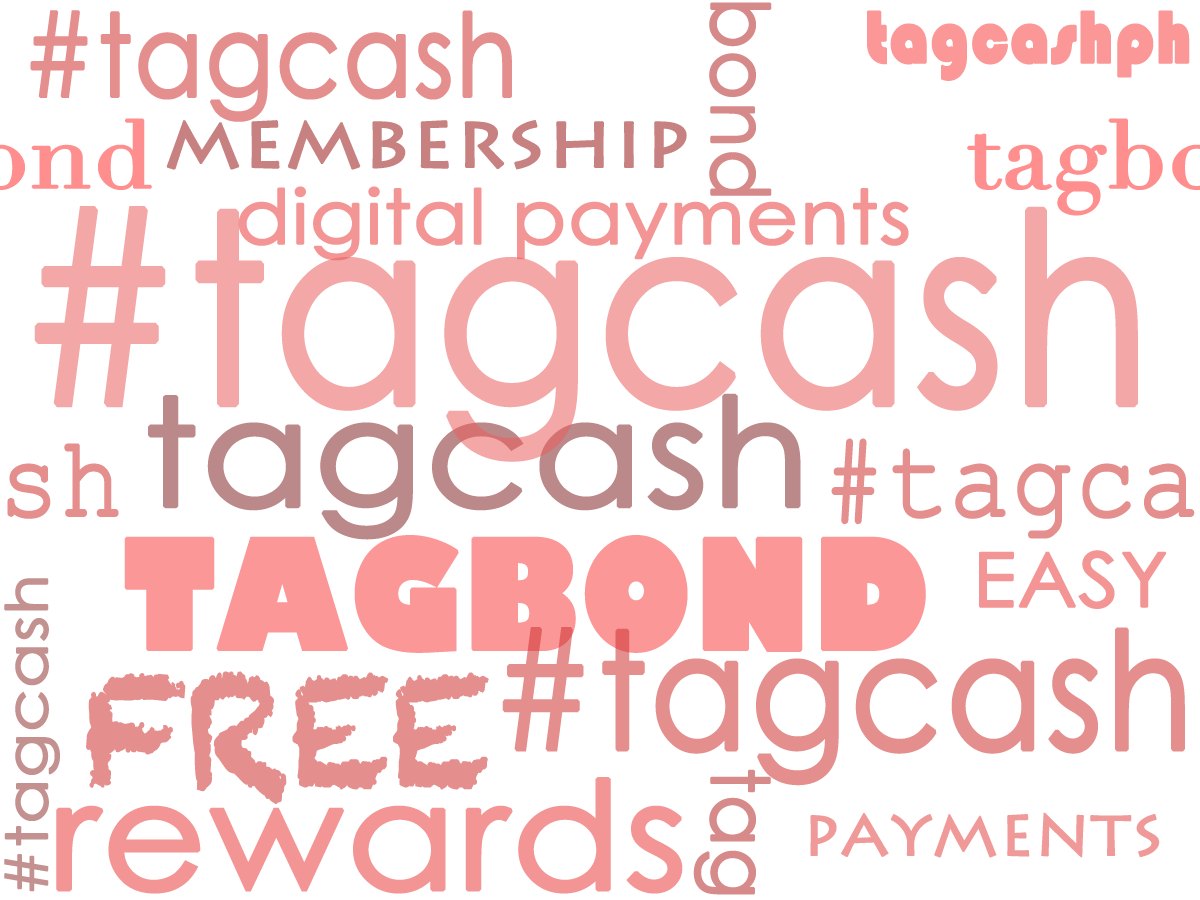
<style>
.page{position:relative;width:1200px;height:900px;background:#ffffff}
.page>*{position:absolute;margin:0}
.t1{font:114.5px "CenturyGothic";color:#e58e8e;font-weight:bold;scale:0.88 1}
.t2{font:76.3px "Bauhaus93";color:#fb9797;font-weight:bold;scale:0.88 1}
.t3{font:74.8px "LithosPro-Regular";color:#c78181;font-weight:bold;scale:1.06 1}
.t4{font:74.8px "CenturyGothic";color:#f49595;font-weight:bold;scale:1.06 1}
.t5{font:262.3px "CenturyGothic";color:#f3a7a7;font-weight:bold;scale:0.88 1}
.t6{font:149.6px "CenturyGothic";color:#bb8989;font-weight:bold;scale:1.06 1}
.t7{font:147.8px "GillSans-UltraBold";color:#fb9797;font-weight:bold;scale:0.88 1}
.t8{font:57.1px "CenturyGothic";color:#c49191;font-weight:bold;scale:1.14 1}
.t9{font:162.1px "CenturyGothic";color:#e58e8e;font-weight:bold;scale:0.88 1}
.t10{font:149.6px "Chalkduster";color:#e58e8e;font-weight:bold;scale:0.88 1}
.t11{font:149.6px "CenturyGothic";color:#f49595;font-weight:bold;scale:1.06 1}
.t12{font:56.1px "LithosPro-Regular";color:#f09999;font-weight:bold;scale:1.06 1}
</style>
<div class="page">
<p class="t1" style="left:30px;top:10px;width:482px;height:112px">#tagcash</p>
<p class="t2" style="left:867px;top:10px;width:323px;height:71px">tagcashph</p>
<p class="t3" style="left:166px;top:120px;width:521px;height:50px">membership</p>
<p class="t4" style="left:238px;top:186px;width:671px;height:75px">digital payments</p>
<p class="t5" style="left:34px;top:206px;width:1104px;height:256px">#tagcash</p>
<p class="t6" style="left:148px;top:393px;width:653px;height:147px">tagcash</p>
<p class="t7" style="left:124px;top:535px;width:802px;height:118px">TAGBOND</p>
<p class="t4" style="left:979px;top:550px;width:188px;height:59px">EASY</p>
<p class="t8" style="left:4px;top:578px;width:56px;height:314px;rotate:-90deg">#tagcash</p>
<p class="t9" style="left:502px;top:627px;width:683px;height:159px">#tagcash</p>
<p class="t10" style="left:86px;top:671px;width:403px;height:133px">FREE</p>
<p class="t11" style="left:56px;top:777px;width:627px;height:117px">rewards</p>
<p class="t12" style="left:810px;top:812px;width:350px;height:46px">PAYMENTS</p>
</div>
